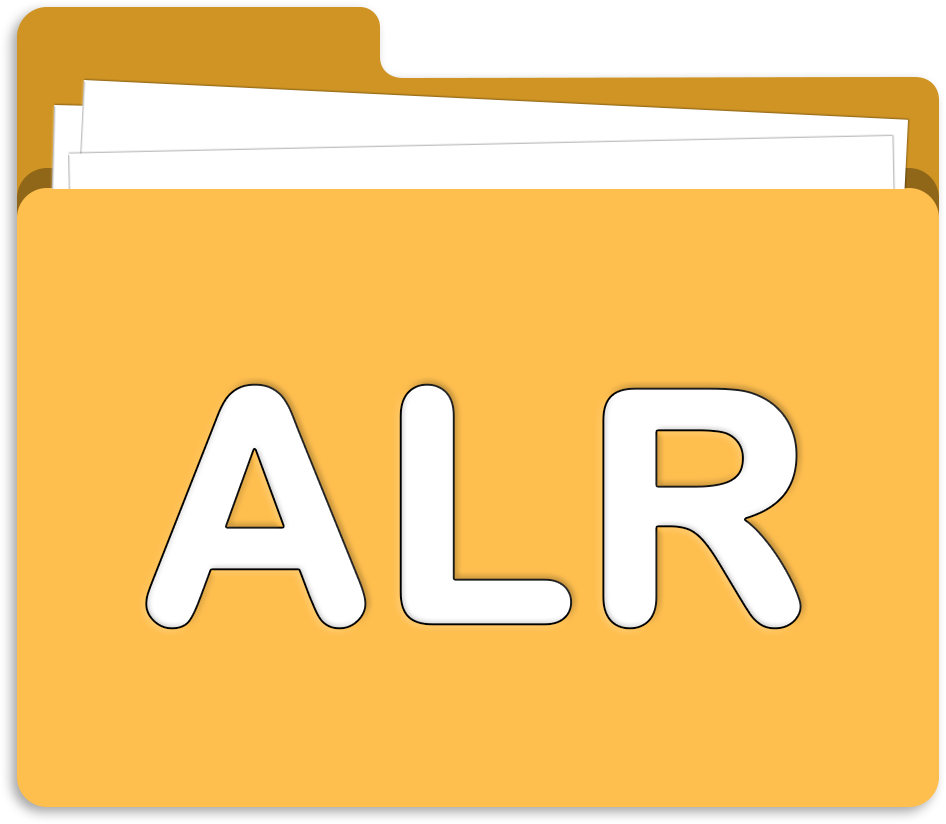
<style>
.page{position:relative;width:946px;height:824px;background:#ffbf4f}
.page>*{position:absolute;margin:0}
.t1{font:320px "ArialRoundedMTBold";color:#ffffff;font-weight:bold}
</style>
<div class="page">
<p class="t1" style="left:145px;top:383px;width:657px;height:247px">ALR</p>
</div>
